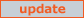
<style>
.page{position:relative;width:84px;height:18px;background:#c7cfd6}
.page>*{position:absolute;margin:0}
.t1{font:12px "Verdana-Bold";color:#f15b23}
</style>
<div class="page">
<p class="t1" style="left:20px;top:3px;width:46px;height:13px">update</p>
</div>
